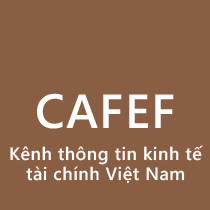
<style>
.page{position:relative;width:210px;height:210px;background:#895e43}
.page>*{position:absolute;margin:0}
.t1{font:48px "SegoeWP-Semibold";letter-spacing:0.025em;color:#ffffff}
.t2{font:18px "SegoeWP-Semibold";letter-spacing:0.025em;color:#fefefe}
.t3{font:18px "SegoeWP-Semibold";letter-spacing:0.025em;color:#ffffff}
</style>
<div class="page">
<p class="t1" style="left:37px;top:93px;width:137px;height:36px">CAFEF</p>
<p class="t2" style="left:10px;top:145px;width:193px;height:20px">Kênh thông tin kinh tế</p>
<p class="t3" style="left:26px;top:166px;width:159px;height:17px">tài chính Việt Nam</p>
</div>
